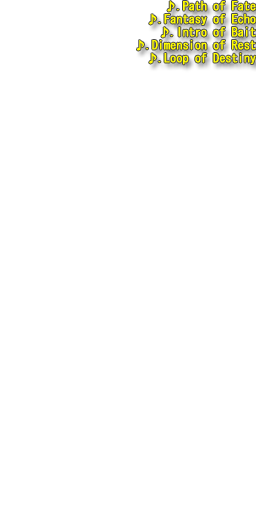
<style>
.page{position:relative;width:256px;height:512px;background:#ffffff}
.page>*{position:absolute;margin:0}
.t1{font:12px/13px "MS-Gothic";color:#fffc00;font-weight:bold;scale:0.97 1}
</style>
<div class="page">
<p class="t1" style="left:137px;top:1px;width:119px;height:64px;text-align:right">♪.Path of Fate<br>♪.Fantasy of Echo<br>♪.Intro of Bait<br>♪.Dimension of Rest<br>♪.Loop of Destiny</p>
</div>
